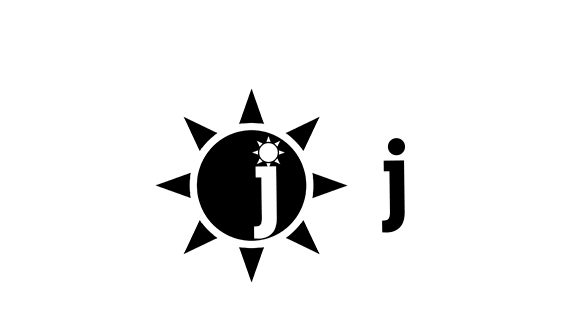
<style>
.page{position:relative;width:585px;height:326px;background:#ffffff}
.page>*{position:absolute;margin:0}
.t1{font:100.4px "Rockwell-CondensedBold";color:#fefefe}
.t2{font:100.4px "Rockwell-CondensedBold";color:#000000}
</style>
<div class="page">
<p class="t1" style="left:254px;top:144px;width:24px;height:95px;rotate:-1deg">j</p>
<p class="t2" style="left:382px;top:138px;width:24px;height:95px;rotate:-1deg">j</p>
</div>
